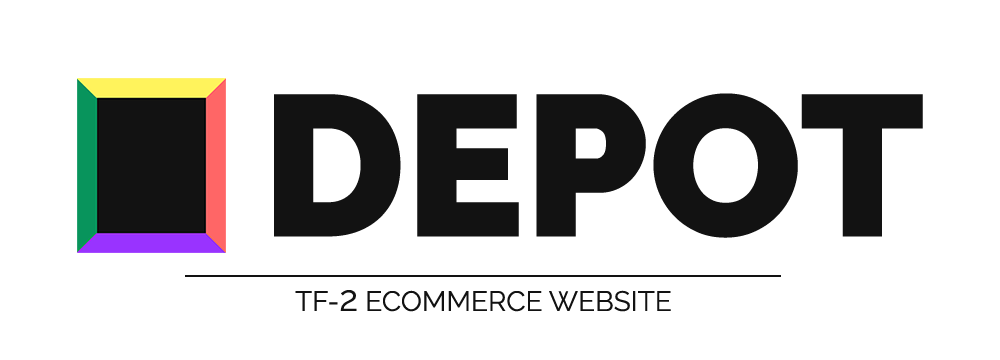
<style>
.page{position:relative;width:1000px;height:360px;background:#ffffff}
.page>*{position:absolute;margin:0}
.t1{font:200px "Raleway-Black";color:#121212}
.t2{font:28px "Raleway-Regular";color:#121212}
.t3{font:36px "Raleway-Regular";color:#121212}
</style>
<div class="page">
<p class="t1" style="left:274px;top:93px;width:649px;height:145px">DEPOT</p>
<p class="t2" style="left:295px;top:290px;width:376px;height:22px">TF-<span class="t3">2</span> ECOMMERCE WEBSITE</p>
</div>
